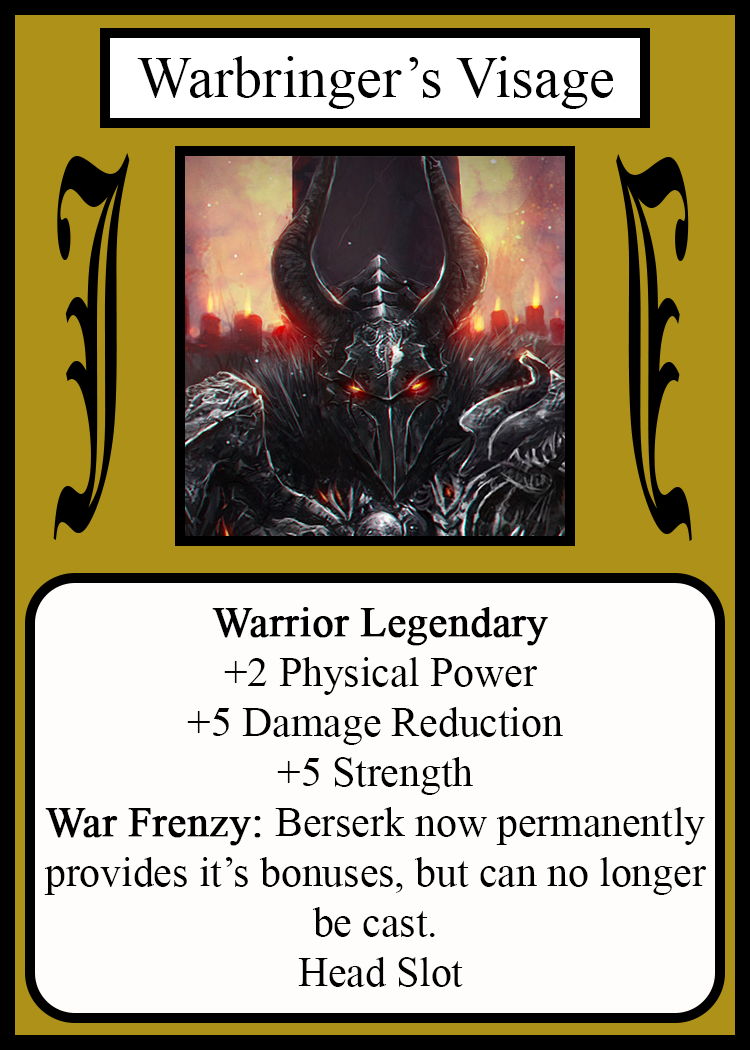
<style>
.page{position:relative;width:750px;height:1050px;background:#fffcfc}
.page>*{position:absolute;margin:0}
.t1{font:58.3px "TimesNewRomanPSMT";color:#010101}
.t2{font:450.1px "OldEnglishTextMT";color:#000000;scale:0.26 1}
.t3{font:449.7px "OldEnglishTextMT";color:#000000;scale:0.26 1}
.t4{font:41.7px "TimesNewRomanPSMT";color:#000000}
.t5{font:41.7px "TimesNewRomanPSMT";color:#000000;font-weight:bold}
</style>
<div class="page">
<p class="t1" style="left:137px;top:56px;width:477px;height:53px">Warbringer’s Visage</p>
<p class="t2" style="left:53px;top:153px;width:77px;height:387px">J</p>
<p class="t3" style="left:616px;top:154px;width:76px;height:387px;rotate:180deg">J</p>
<p class="t4" style="left:44px;top:607px;width:663px;height:380px;text-align:center"><span class="t5">Warrior Legendary<br></span> +2 Physical Power<br>+5 Damage Reduction<br>+5 Strength<br><span class="t5">War Frenzy: </span>Berserk now permanently<br>provides it’s bonuses, but can no longer<br>be cast.<br> Head Slot</p>
</div>
